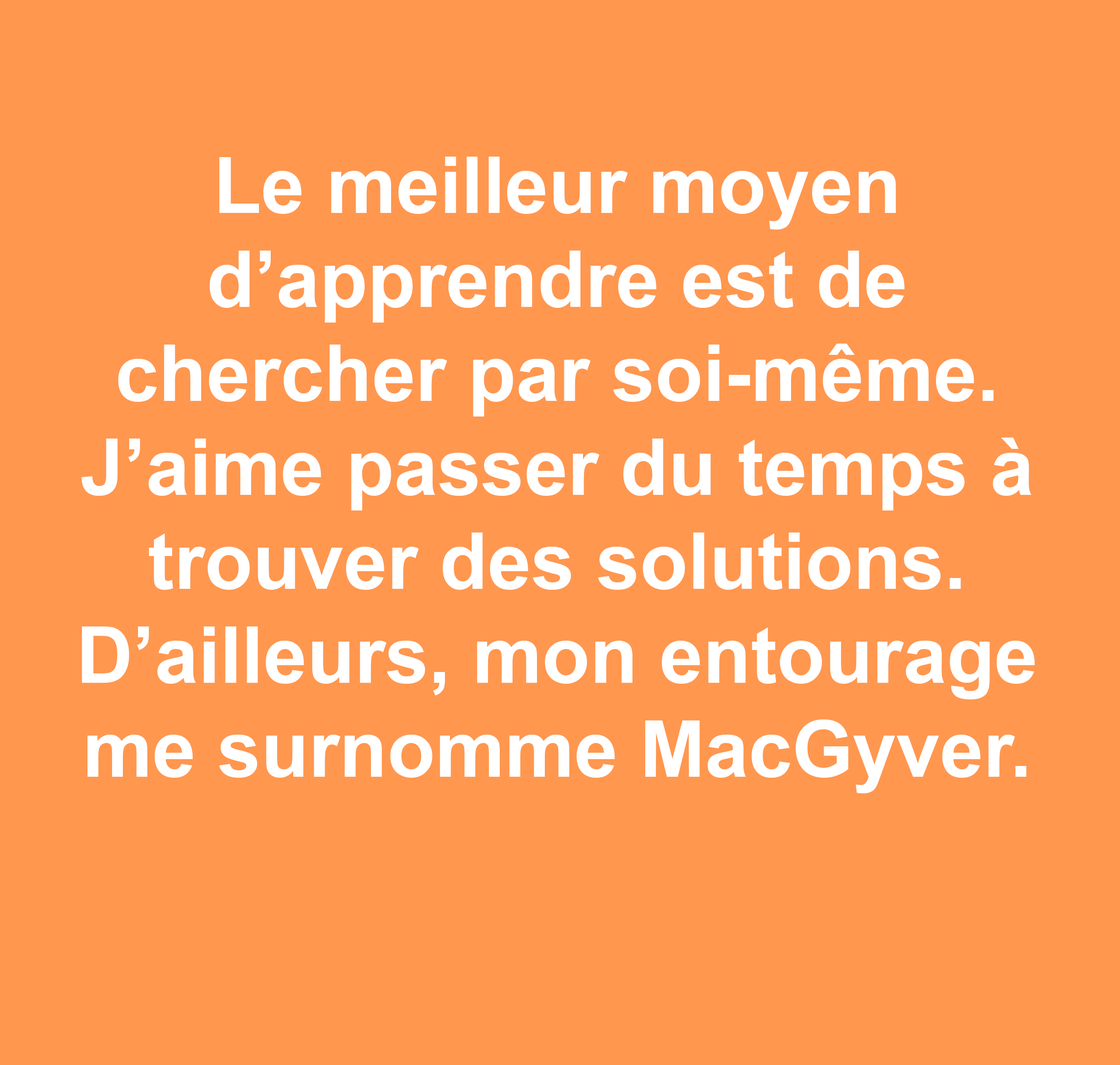
<style>
.page{position:relative;width:1120px;height:1065px;background:#ff974f}
.page>*{position:absolute;margin:0}
.t1{font:78.3px "Arial-BoldMT";color:#ffffff}
</style>
<div class="page">
<p class="t1" style="left:81px;top:157px;width:954px;height:636px;text-align:center">Le meilleur moyen <br>d’apprendre est de <br>chercher par soi-même. <br>J’aime passer du temps à trouver des solutions.<br>D’ailleurs, mon entourage me surnomme MacGyver.</p>
</div>
